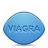
<style>
.page{position:relative;width:48px;height:48px;background:#ffffff}
.page>*{position:absolute;margin:0}
.t1{font:8px "Arial-BoldMT";letter-spacing:0.02em;color:#3f88ca}
</style>
<div class="page">
<p class="t1" style="left:8px;top:25px;width:32px;height:7px">VIAGRA</p>
<p class="t1" style="left:8px;top:25px;width:32px;height:7px">VIAGRA</p>
</div>
